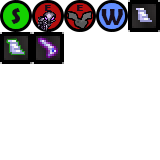
<style>
.page{position:relative;width:160px;height:160px;background:#ffffff}
.page>*{position:absolute;margin:0}
.t1{font:9.3px "BerlinSansFBDemi-Bold";color:#190e1b;scale:1.33 1}
.t2{font:24px "BerlinSansFBDemi-Bold";color:#190e1b}
</style>
<div class="page">
<p class="t1" style="left:44px;top:5px;width:7px;height:6px">E</p>
<p class="t1" style="left:76px;top:5px;width:7px;height:6px">E</p>
<p class="t2" style="left:11px;top:8px;width:9px;height:16px">S</p>
<p class="t2" style="left:101px;top:9px;width:22px;height:16px">W</p>
</div>
